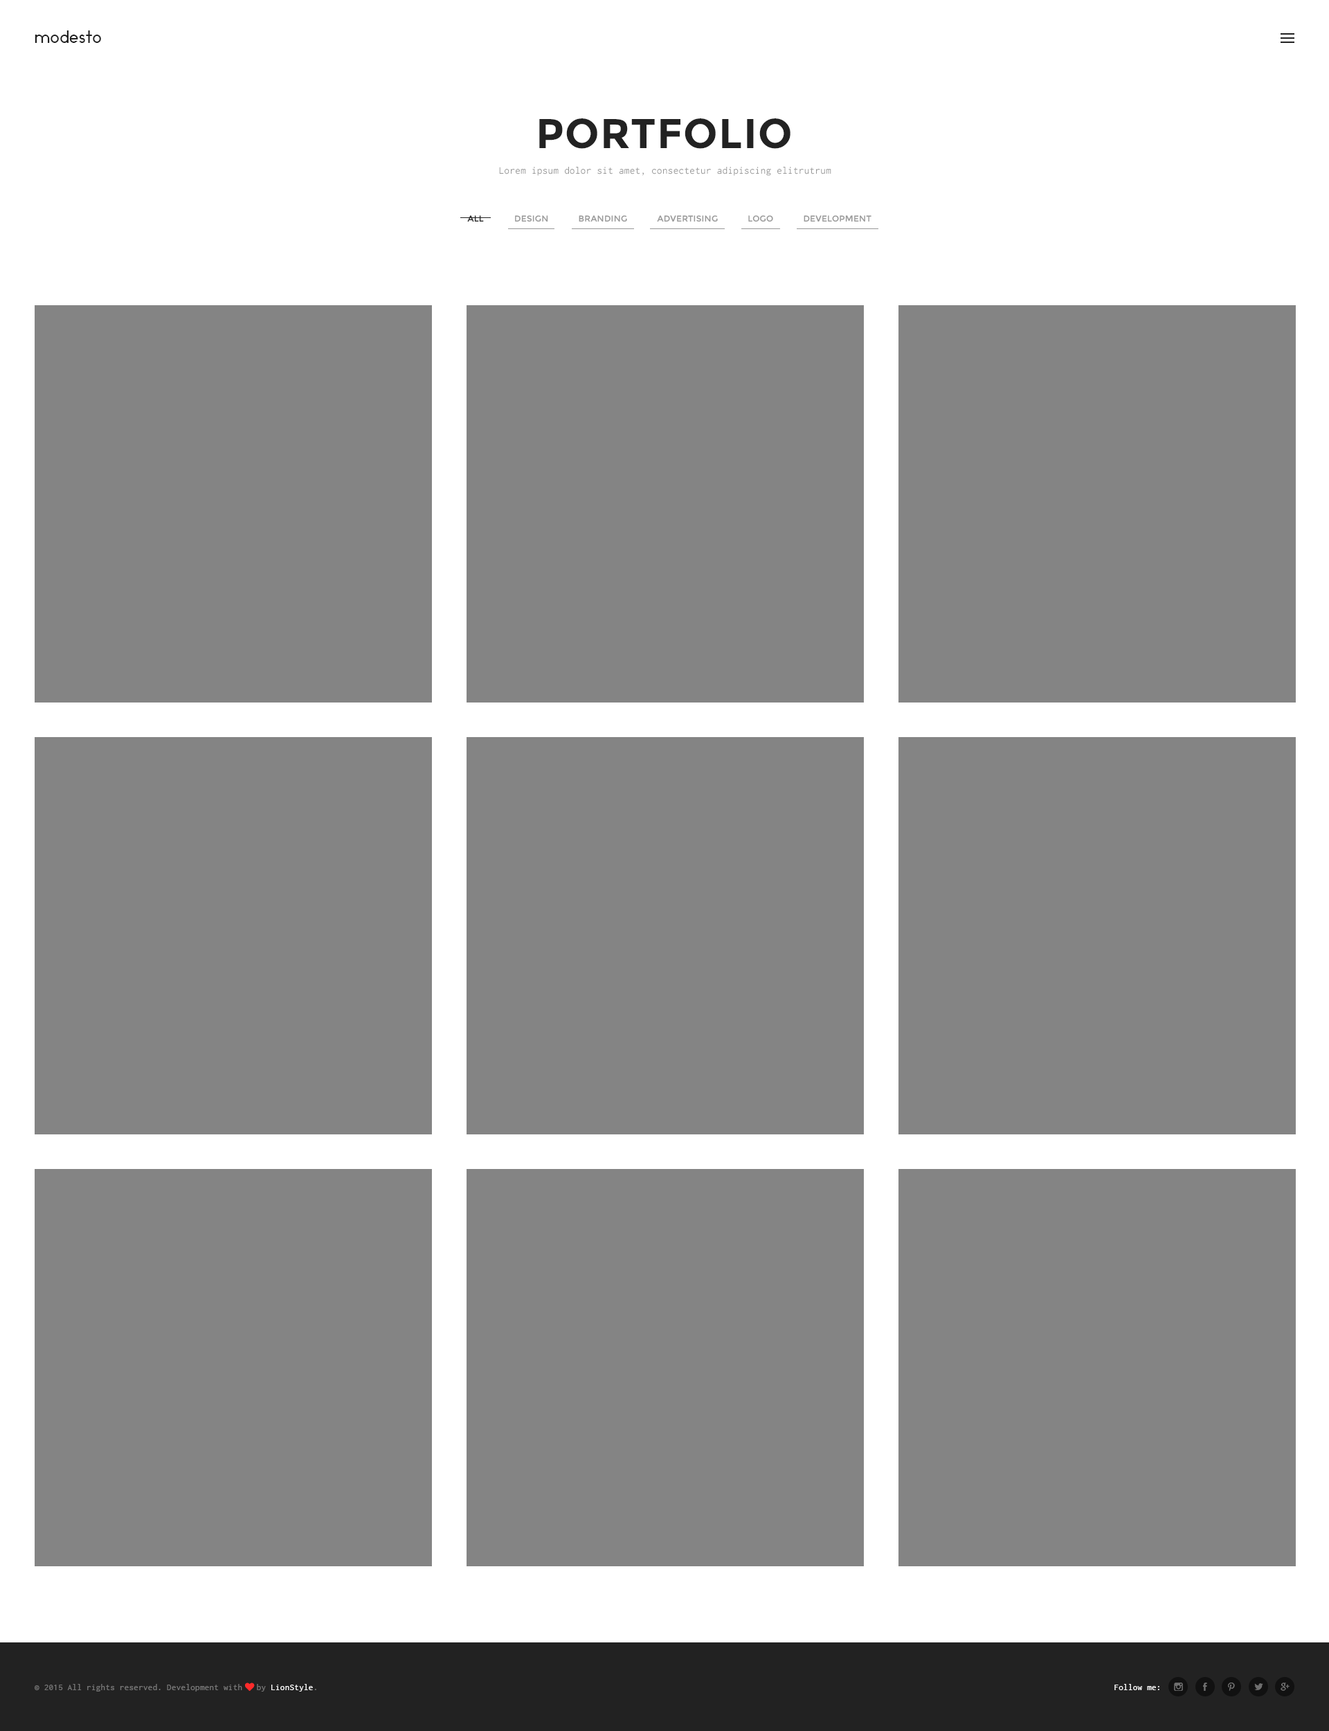
<style>
.page{position:relative;width:1329px;height:1731px;background:#848484}
.page>*{position:absolute;margin:0}
.t1{font:16.6px "Ikaros";letter-spacing:0.025em;color:#222222}
.t2{font:41.5px "Montserrat-Bold";letter-spacing:0.025em;color:#222222;text-transform:uppercase}
.t3{font:10.4px "Inconsolata";letter-spacing:0.025em;color:#989898}
.t4{font:8.3px "Montserrat-Regular";letter-spacing:0.025em;color:#222222;text-transform:uppercase}
.t5{font:8.3px "Montserrat-Regular";letter-spacing:0.025em;color:#989898;text-transform:uppercase}
.t6{font:9px "Inconsolata";letter-spacing:0.025em;color:#777777}
.t7{font:9px "FontAwesome";letter-spacing:0.025em;color:#fe2b2b}
.t8{font:9px "Inconsolata";letter-spacing:0.025em;color:#ffffff}
.t9{font:9px "Inconsolata";letter-spacing:0.025em;color:#fefefe}
</style>
<div class="page">
<p class="t1" style="left:35px;top:30px;width:66px;height:13px">modesto</p>
<p class="t2" style="left:539px;top:118px;width:252px;height:31px">portfolio</p>
<p class="t3" style="left:499px;top:167px;width:332px;height:9px">Lorem ipsum dolor sit amet, consectetur adipiscing elitrutrum</p>
<p class="t4" style="left:467px;top:215px;width:17px;height:7px">all</p>
<p class="t5" style="left:515px;top:215px;width:357px;height:7px">design            branding            advertising            logo            development</p>
<p class="t6" style="left:35px;top:1683px;width:281px;height:9px">© 2015 All rights reserved. Development with <span class="t7">♥ </span>by <span class="t8">LionStyle</span>.</p>
<p class="t9" style="left:1115px;top:1684px;width:45px;height:7px">Follow me:</p>
</div>
